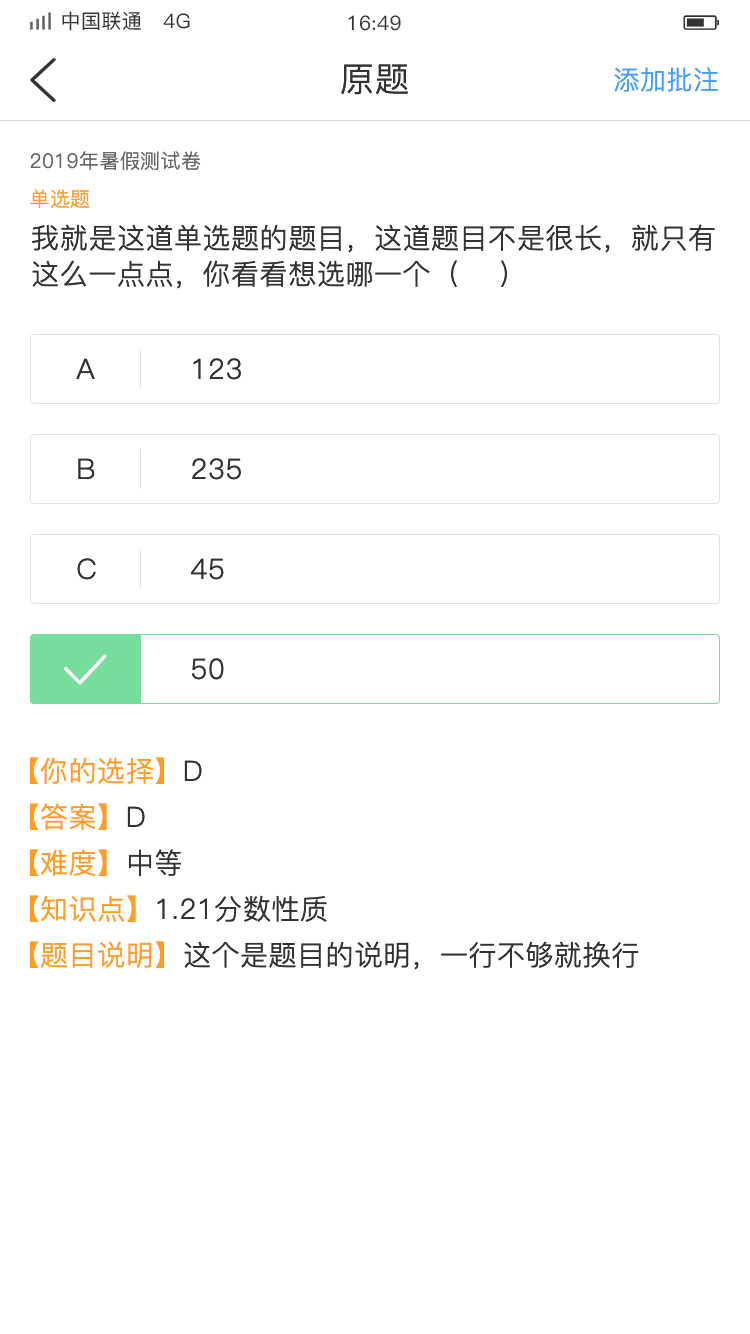
<style>
.page{position:relative;width:750px;height:1334px;background:#ffffff}
.page>*{position:absolute;margin:0}
.t1{font:20px "PingFang-SC-Medium";letter-spacing:0.02em;color:#333333}
.t2{font:34px "PingFang-SC-Regular";letter-spacing:0.02em;color:#333333}
.t3{font:26px "PingFang-SC-Regular";letter-spacing:0.02em;color:#409eff}
.t4{font:20px "PingFang-SC-Regular";letter-spacing:0.02em;color:#666666}
.t5{font:20px "PingFang-SC-Regular";letter-spacing:0.02em;color:#ff9e21}
.t6{font:28px/36px "PingFang-SC-Regular";letter-spacing:0.02em;color:#333333}
.t7{font:28px "PingFang-SC-Regular";letter-spacing:0.02em;color:#333333}
.t8{font:28px "PingFang-SC-Regular";letter-spacing:0.02em;color:#ff9e21}
</style>
<div class="page">
<p class="t1" style="left:62px;top:11px;width:128px;height:20px">中国联通   4G</p>
<p class="t1" style="left:348px;top:15px;width:53px;height:16px">16:49</p>
<p class="t2" style="left:341px;top:64px;width:67px;height:31px">原题</p>
<p class="t3" style="left:614px;top:67px;width:104px;height:25px">添加批注</p>
<p class="t4" style="left:30px;top:151px;width:171px;height:20px">2019年暑假测试卷</p>
<p class="t5" style="left:30px;top:189px;width:60px;height:19px">单选题</p>
<p class="t6" style="left:32px;top:224px;width:683px;height:65px">我就是这道单选题的题目，这道题目不是很长，就只有这么一点点，你看看想选哪一个（    ）</p>
<p class="t7" style="left:76px;top:358px;width:19px;height:21px">A</p>
<p class="t7" style="left:193px;top:358px;width:48px;height:22px">123</p>
<p class="t7" style="left:78px;top:458px;width:17px;height:21px">B</p>
<p class="t7" style="left:192px;top:458px;width:49px;height:22px">235</p>
<p class="t7" style="left:77px;top:558px;width:19px;height:22px">C</p>
<p class="t7" style="left:191px;top:558px;width:33px;height:22px">45</p>
<p class="t7" style="left:192px;top:658px;width:32px;height:22px">50</p>
<p class="t8" style="left:30px;top:757px;width:172px;height:27px">【你的选择】<span class="t7">D</span></p>
<p class="t8" style="left:30px;top:803px;width:115px;height:27px">【答案】<span class="t7">D</span></p>
<p class="t8" style="left:30px;top:849px;width:151px;height:27px">【难度】<span class="t7">中等</span></p>
<p class="t7" style="left:30px;top:895px;width:297px;height:27px"><span class="t8">【知识点】</span>1.21分数性质</p>
<p class="t7" style="left:30px;top:941px;width:609px;height:29px"><span class="t8">【题目说明】</span>这个是题目的说明，一行不够就换行</p>
</div>
